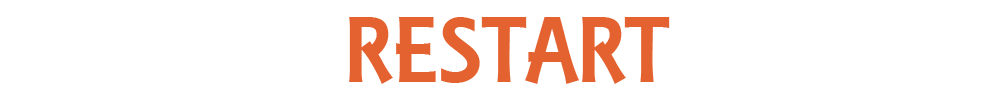
<style>
.page{position:relative;width:1000px;height:100px;background:#ffffff}
.page>*{position:absolute;margin:0}
.t1{font:100px "ARESSENCE";color:#e4622f}
</style>
<div class="page">
<p class="t1" style="left:349px;top:17px;width:321px;height:67px">RESTART</p>
</div>
